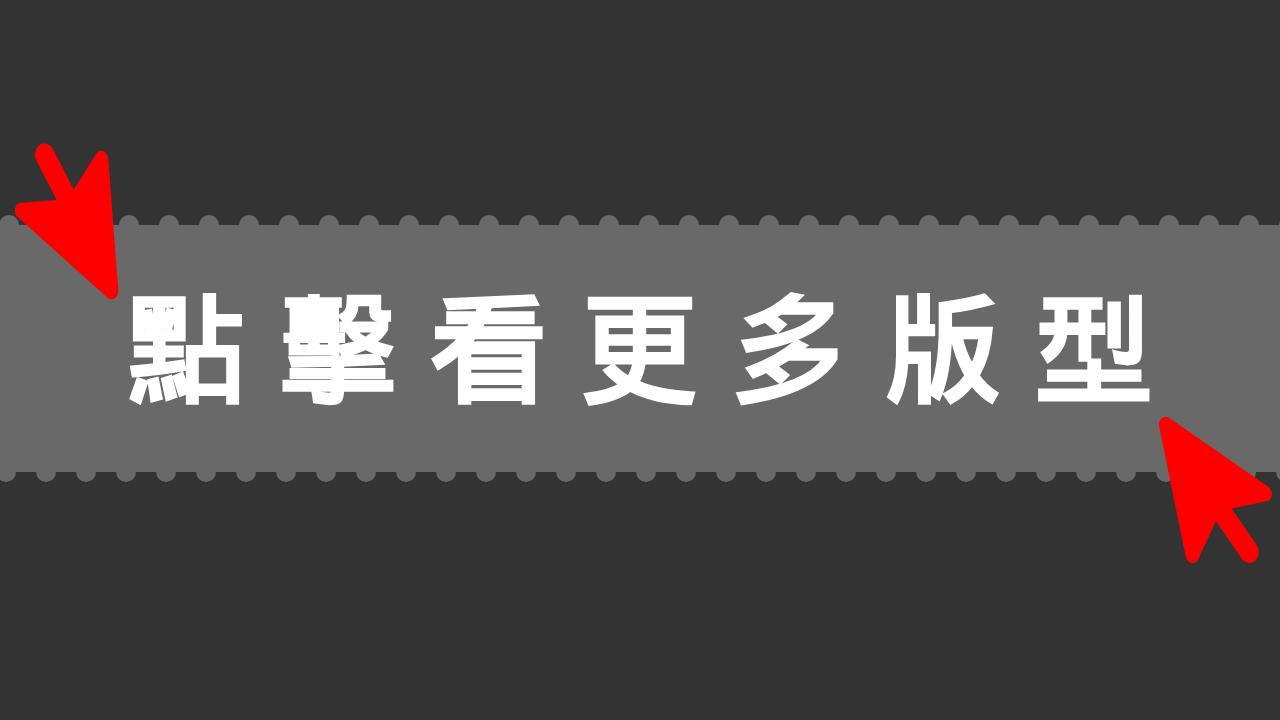
<style>
.page{position:relative;width:1280px;height:720px;background:#333333}
.page>*{position:absolute;margin:0}
.t1{font:120px "DroidSansFallback";color:#ffffff}
</style>
<div class="page">
<p class="t1" style="left:127px;top:290px;width:1025px;height:118px">點 擊 看 更 多 版 型</p>
</div>
